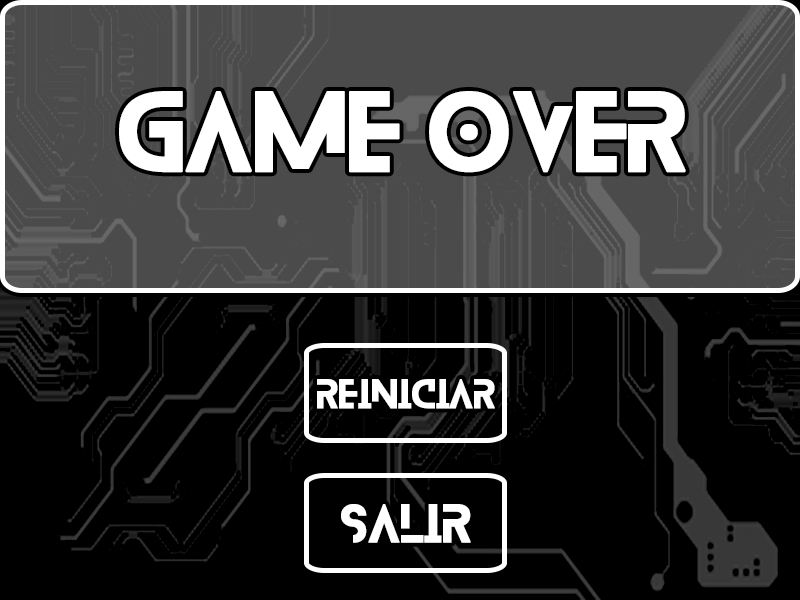
<style>
.page{position:relative;width:800px;height:600px;background:#000000}
.page>*{position:absolute;margin:0}
.t1{font:100px "Blanka-Regular";color:#ffffff;font-weight:bold}
.t2{font:36px "Blanka-Regular";color:#ffffff;font-weight:bold}
.t3{font:48px "Blanka-Regular";color:#ffffff;font-weight:bold}
</style>
<div class="page">
<p class="t1" style="left:119px;top:91px;width:567px;height:82px">GAME OVER</p>
<p class="t2" style="left:317px;top:379px;width:178px;height:30px">reINICIAR</p>
<p class="t3" style="left:341px;top:504px;width:130px;height:39px">SALIR</p>
</div>
